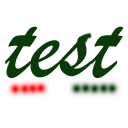
<style>
.page{position:relative;width:128px;height:128px;background:#ffffff}
.page>*{position:absolute;margin:0}
.t1{font:100px "BrushScriptMT";color:#0b3a09}
</style>
<div class="page">
<p class="t1" style="left:5px;top:26px;width:119px;height:52px">test</p>
</div>
